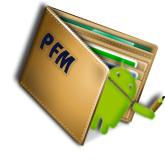
<style>
.page{position:relative;width:165px;height:165px;background:#ffffff}
.page>*{position:absolute;margin:0}
.t1{font:23.7px "TwCenMT-CondensedExtraBold";color:#0c1538}
</style>
<div class="page">
<p class="t1" style="left:40px;top:32px;width:36px;height:42px;rotate:45deg">PFM</p>
</div>
